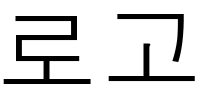
<style>
.page{position:relative;width:200px;height:100px;background:#ffffff}
.page>*{position:absolute;margin:0}
.t1{font:102px "Dotum";letter-spacing:0.025em;color:#000000}
</style>
<div class="page">
<p class="t1" style="left:3px;top:14px;width:192px;height:70px">로고</p>
</div>
